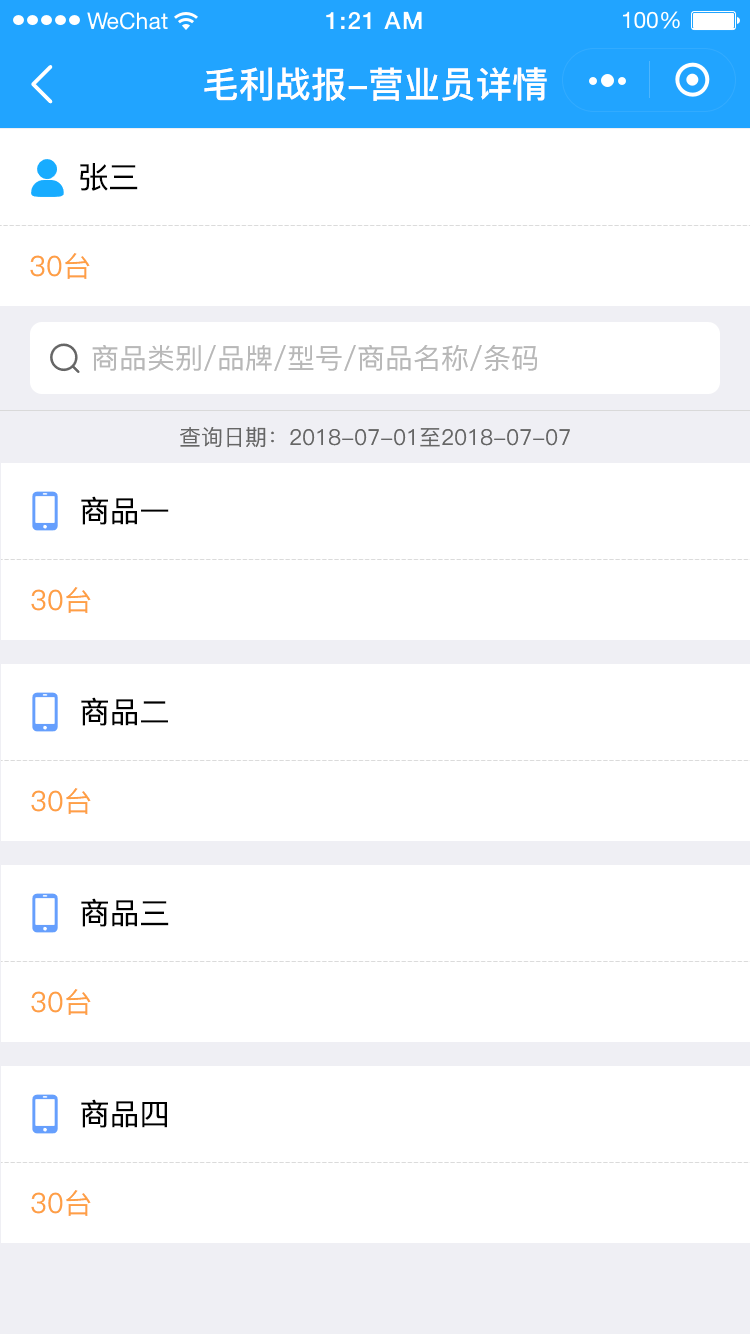
<style>
.page{position:relative;width:750px;height:1334px;background:#ffffff}
.page>*{position:absolute;margin:0}
.t1{font:36px "PingFang-SC-Bold";color:#ffffff}
.t2{font:30px "PingFang-SC-Medium";color:#000000}
.t3{font:28px "PingFang-SC-Medium";color:#fe9f45}
.t4{font:28px "PingFang-SC-Medium";color:#b8b8b8}
.t5{font:22px "PingFang-SC-Medium";color:#666666}
</style>
<div class="page">
<p class="t1" style="left:204px;top:67px;width:343px;height:34px">毛利战报-营业员详情</p>
<p class="t2" style="left:80px;top:163px;width:58px;height:28px">张三</p>
<p class="t3" style="left:30px;top:253px;width:60px;height:26px">30台</p>
<p class="t4" style="left:92px;top:344px;width:445px;height:27px">商品类别/品牌/型号/商品名称/条码</p>
<p class="t5" style="left:180px;top:427px;width:390px;height:21px">查询日期：2018-07-01至2018-07-07</p>
<p class="t2" style="left:81px;top:496px;width:88px;height:29px">商品一</p>
<p class="t3" style="left:31px;top:587px;width:60px;height:26px">30台</p>
<p class="t2" style="left:81px;top:697px;width:87px;height:29px">商品二</p>
<p class="t3" style="left:31px;top:788px;width:60px;height:26px">30台</p>
<p class="t2" style="left:81px;top:898px;width:88px;height:29px">商品三</p>
<p class="t3" style="left:31px;top:989px;width:60px;height:26px">30台</p>
<p class="t2" style="left:81px;top:1099px;width:86px;height:29px">商品四</p>
<p class="t3" style="left:31px;top:1190px;width:60px;height:26px">30台</p>
</div>
